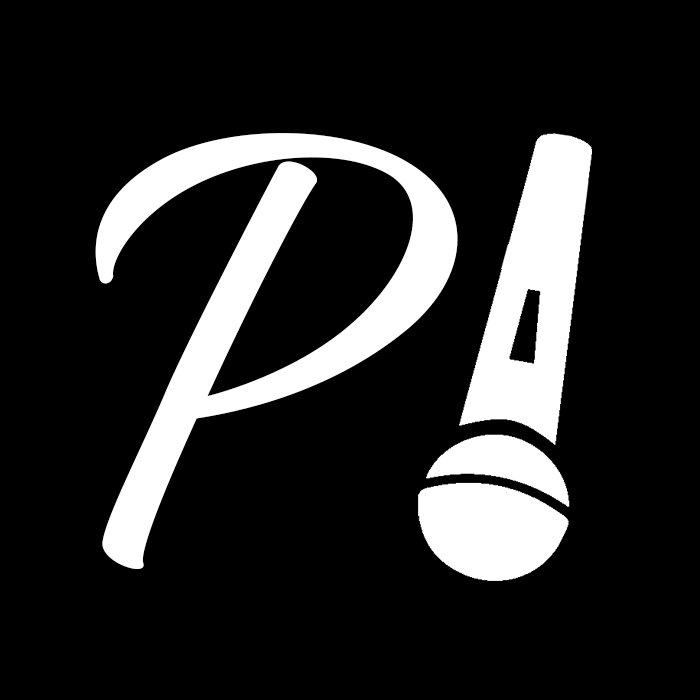
<style>
.page{position:relative;width:700px;height:700px;background:#000000}
.page>*{position:absolute;margin:0}
.t1{font:600px "Relation";color:#ffffff}
</style>
<div class="page">
<p class="t1" style="left:95px;top:133px;width:363px;height:436px">P</p>
</div>
